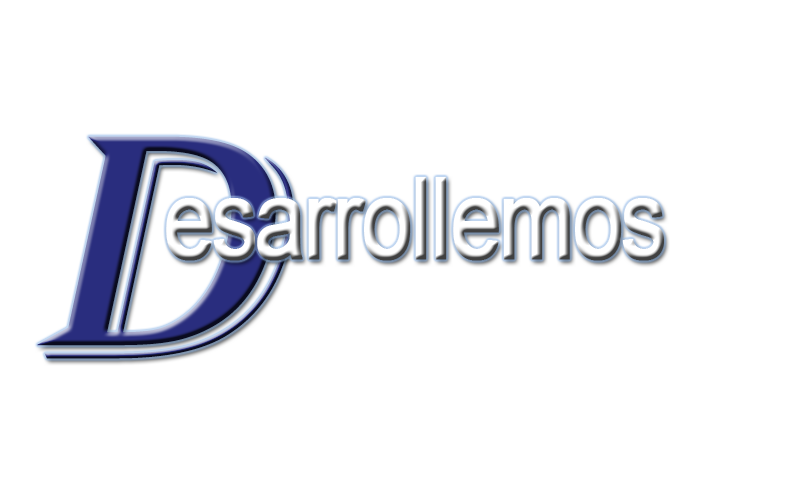
<style>
.page{position:relative;width:800px;height:480px;background:#ffffff}
.page>*{position:absolute;margin:0}
.t1{font:332px "Algerian";color:#2a2d7e;font-weight:bold;font-style:italic;scale:1.23 1}
.t2{font:112.8px "ArialMT";color:#ffffff;font-weight:bold;scale:0.8 1}
</style>
<div class="page">
<p class="t1" style="left:37px;top:136px;width:257px;height:223px">D</p>
<p class="t2" style="left:166px;top:177px;width:498px;height:84px">esarrollemos</p>
</div>
